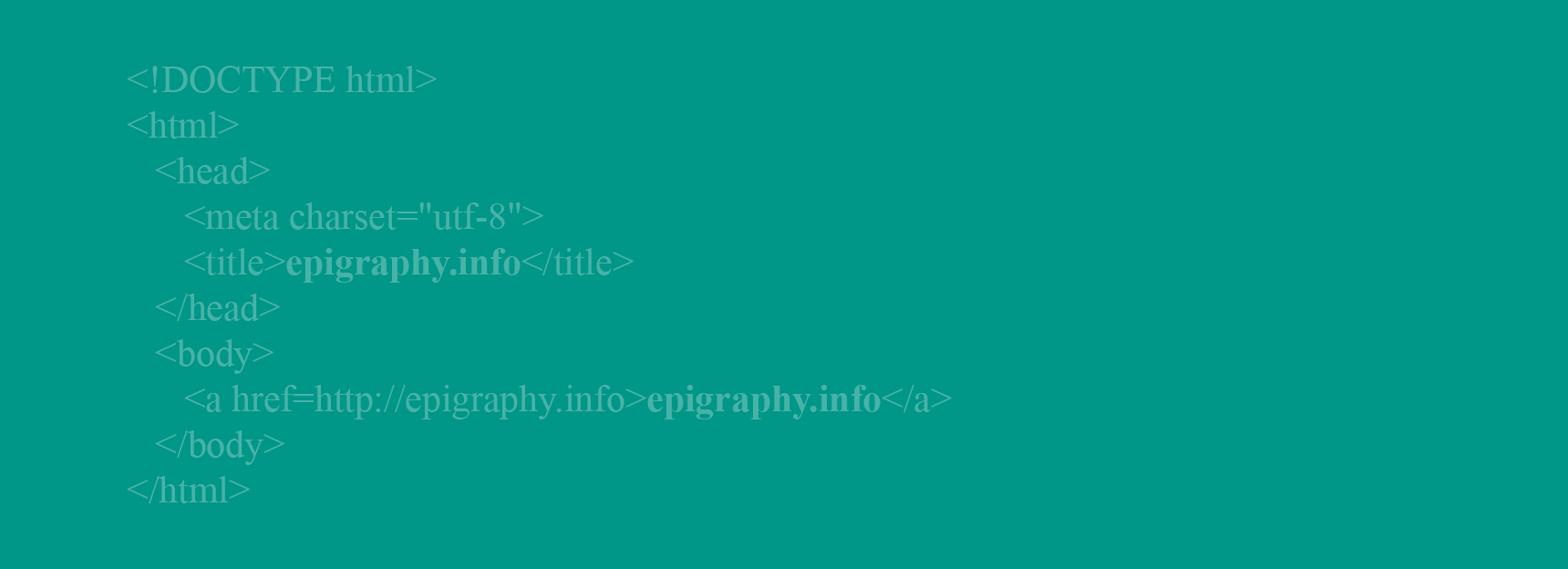
<style>
.page{position:relative;width:1568px;height:569px;background:#009788}
.page>*{position:absolute;margin:0}
.t1{font:38px "TimesNewRomanPSMT";color:#47b2a8}
.t2{font:38px "TimesNewRomanPS-BoldMT";color:#47b2a8}
</style>
<div class="page">
<p class="t1" style="left:127px;top:66px;width:825px;height:437px">&lt;!DOCTYPE html&gt;<br>&lt;html&gt; <br>   &lt;head&gt; <br>      &lt;meta charset="utf-8"&gt; <br>      &lt;title&gt;<span class="t2">epigraphy.info</span>&lt;/title&gt; <br>   &lt;/head&gt;<br>   &lt;body&gt; <br>      &lt;a href=http://epigraphy.info&gt;<span class="t2">epigraphy.info</span>&lt;/a&gt; <br>   &lt;/body&gt; <br>&lt;/html&gt;</p>
</div>
